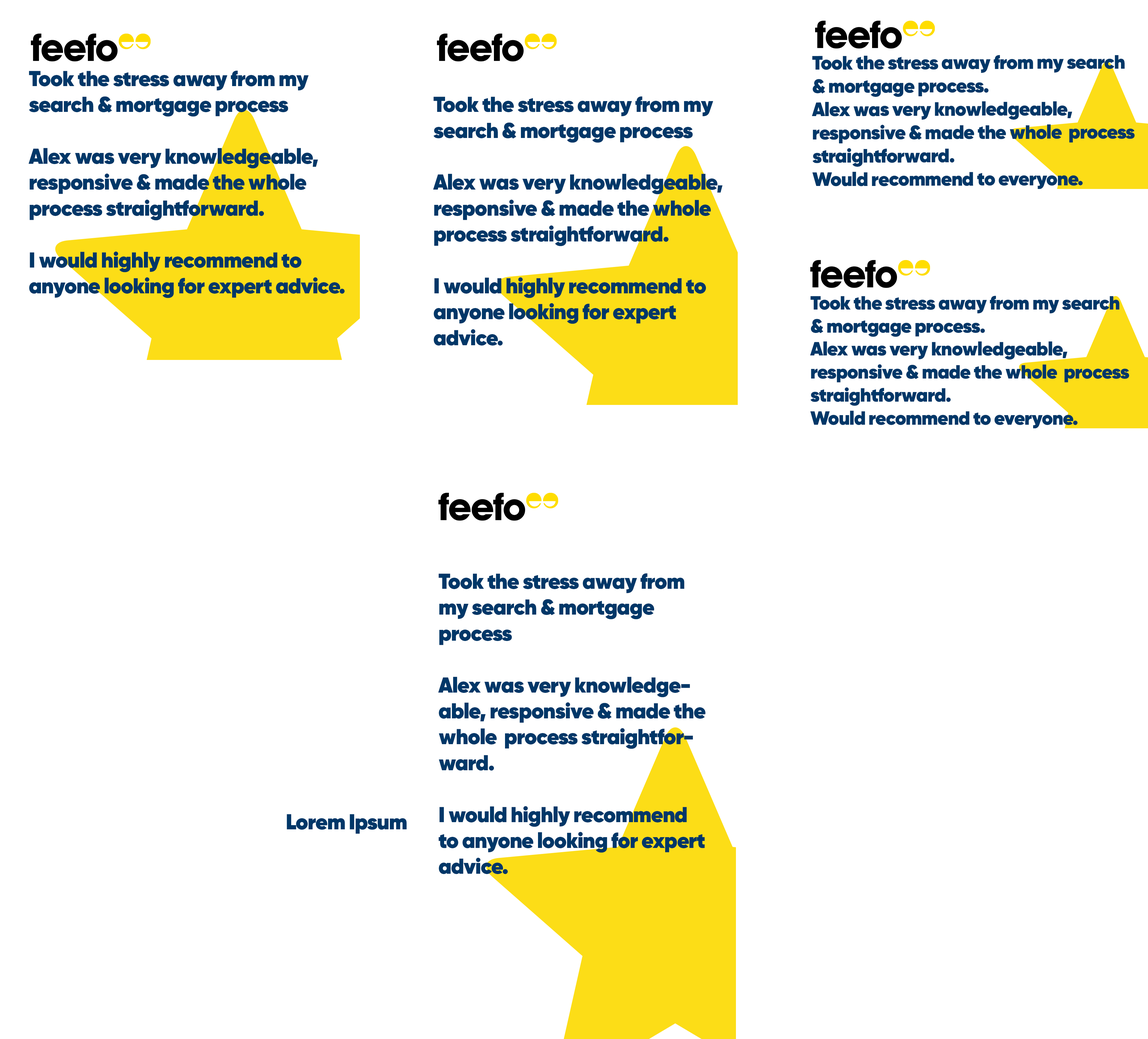
<style>
.page{position:relative;width:1148px;height:1039px;background:#ffffff}
.page>*{position:absolute;margin:0}
.t1{font:19.4px "Gilroy-Heavy";letter-spacing:-0.022em;color:#003768}
.t2{font:21.6px "Gilroy-Heavy";letter-spacing:-0.022em;color:#003768}
.t3{font:19.2px "Gilroy-Heavy";letter-spacing:-0.022em;color:#003768}
</style>
<div class="page">
<p class="t1" style="left:812px;top:55px;width:323px;height:134px">Took the stress away from my search <br>&amp; mortgage process.<br>Alex was very knowledgeable, <br>responsive &amp; made the whole  process straightforward.<br>Would recommend to everyone.</p>
<p class="t2" style="left:28px;top:70px;width:317px;height:228px">Took the stress away from my search &amp; mortgage process<br><br>Alex was very knowledgeable, <br>responsive &amp; made the whole  <br>process straightforward.<br><br>I would highly recommend to anyone looking for expert advice.</p>
<p class="t2" style="left:433px;top:96px;width:290px;height:249px">Took the stress away from my search &amp; mortgage process<br><br>Alex was very knowledgeable, responsive &amp; made the whole  process straightforward.<br><br>I would highly recommend to anyone looking for expert advice.</p>
<p class="t3" style="left:810px;top:296px;width:319px;height:133px">Took the stress away from my search <br>&amp; mortgage process.<br>Alex was very knowledgeable, <br>responsive &amp; made the whole  process straightforward.<br>Would recommend to everyone.</p>
<p class="t2" style="left:438px;top:573px;width:268px;height:301px">Took the stress away from my search &amp; mortgage <br>process<br><br>Alex was very knowledgeable, responsive &amp; made the whole  process straightforward.<br><br>I would highly recommend to anyone looking for expert advice.</p>
<p class="t2" style="left:287px;top:814px;width:120px;height:20px">Lorem Ipsum</p>
</div>
